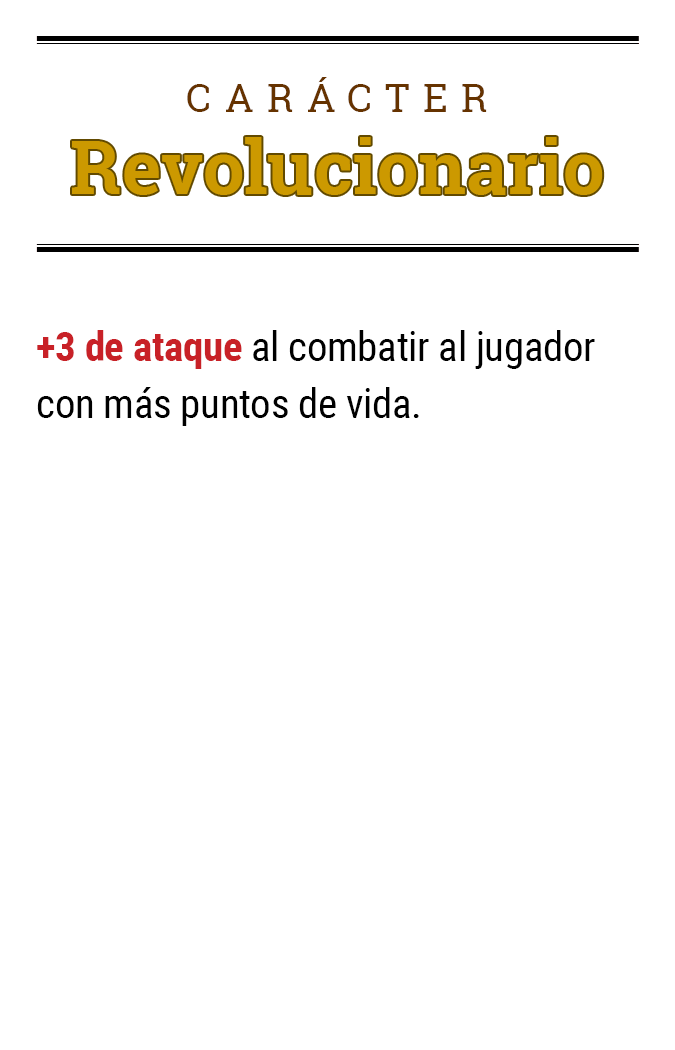
<style>
.page{position:relative;width:675px;height:1050px;background:#ffffff}
.page>*{position:absolute;margin:0}
.t1{font:39.2px "RobotoSlab-Regular";letter-spacing:0.34em;color:#663300}
.t2{font:74.5px "RobotoSlab-Bold";color:#cc9900}
.t3{font:41.1px/57.1px "RobotoCondensed-Regular";letter-spacing:-0.01em;color:#000000}
.t4{font:41.1px/57.1px "RobotoCondensed-Bold";letter-spacing:-0.01em;color:#c82127}
</style>
<div class="page">
<p class="t1" style="left:187px;top:77px;width:300px;height:35px">CARÁCTER</p>
<p class="t2" style="left:72px;top:137px;width:531px;height:58px">Revolucionario</p>
<p class="t3" style="left:37px;top:330px;width:558px;height:96px"><span class="t4">+3 de ataque</span> al combatir al jugador con más puntos de vida.</p>
</div>
